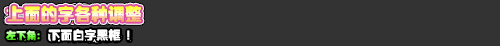
<style>
.page{position:relative;width:500px;height:46px;background:#333333}
.page>*{position:absolute;margin:0}
.t1{font:16.8px "Tensentype-JinZhuanHeiJ"}
.t2{font:10px "Tensentype-JinZhuanHeiJ"}
.t3{font:12px "Tensentype-JinZhuanHeiJ";color:#ffffff}
</style>
<div class="page">
<p class="t1" style="left:7px;top:5px;width:135px;height:17px">上面的字各种调整</p>
<p class="t1" style="left:7px;top:5px;width:135px;height:17px">上面的字各种调整</p>
<p class="t1" style="left:7px;top:5px;width:135px;height:17px">上面的字各种调整</p>
<p class="t2" style="left:6px;top:30px;width:34px;height:11px">左下角：</p>
<p class="t3" style="left:48px;top:29px;width:82px;height:12px">下面白字黑框 !</p>
</div>
